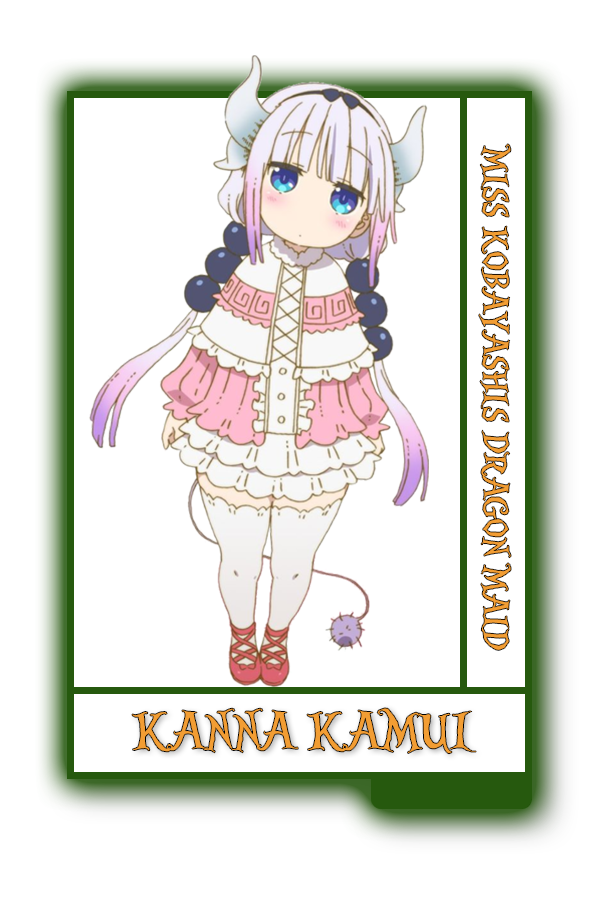
<style>
.page{position:relative;width:600px;height:900px;background:#ffffff}
.page>*{position:absolute;margin:0}
.t1{font:37.3px "AliceinWonderland";color:#f29d33}
.t2{font:56px "AliceinWonderland";color:#f29d33}
</style>
<div class="page">
<p class="t1" style="left:479px;top:144px;width:32px;height:506px;rotate:90deg">MISS KOBAYASHIS DRAGON MAID</p>
<p class="t2" style="left:132px;top:708px;width:344px;height:46px">KANNA KAMUI</p>
</div>
